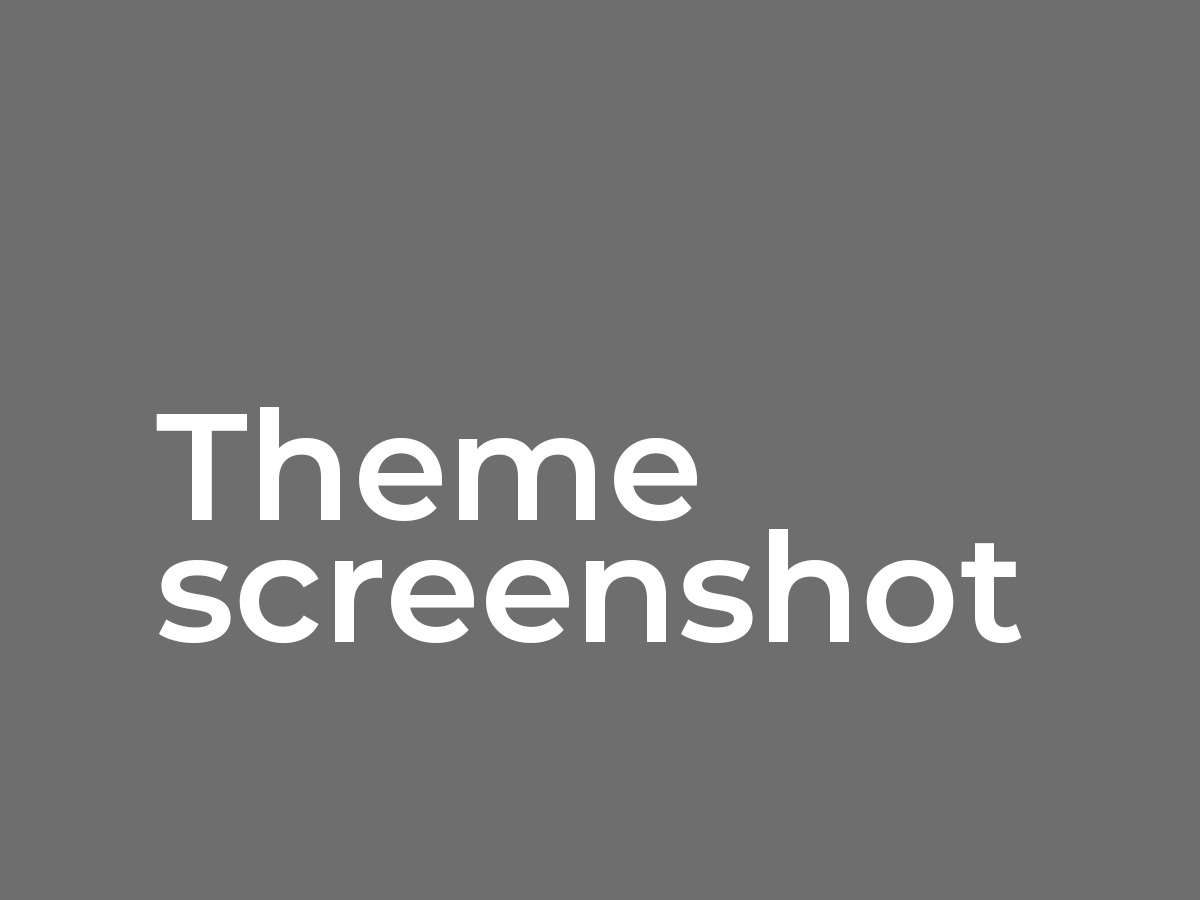
<style>
.page{position:relative;width:1200px;height:900px;background:#6e6e6e}
.page>*{position:absolute;margin:0}
.t1{font:152px "Montserrat-SemiBold";color:#ffffff}
</style>
<div class="page">
<p class="t1" style="left:156px;top:407px;width:866px;height:237px">Theme screenshot</p>
</div>
